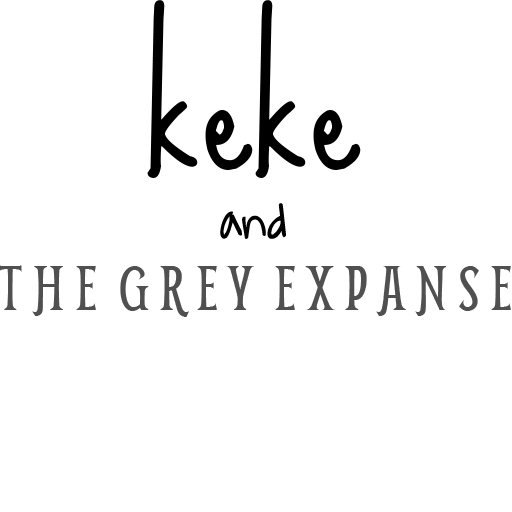
<style>
.page{position:relative;width:512px;height:512px;background:#ffffff}
.page>*{position:absolute;margin:0}
.t1{font:166.7px "SueEllenFrancisco";color:#000000}
.t2{font:50px "WaitingfortheSunrise";color:#000000;font-weight:bold}
.t3{font:69.4px "Smythe";color:#505050}
</style>
<div class="page">
<p class="t1" style="left:147px;top:0px;width:214px;height:178px">keke</p>
<p class="t2" style="left:220px;top:203px;width:66px;height:36px">and</p>
<p class="t3" style="left:0px;top:265px;width:511px;height:52px">T H E  G R E Y  E X P A N S E</p>
</div>
